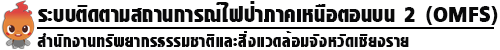
<style>
.page{position:relative;width:500px;height:50px;background:#ffffff}
.page>*{position:absolute;margin:0}
.t1{font:33.3px "PSLImperialExtra";letter-spacing:0.005em;color:#09090a}
.t2{font:25px "PSLImperialExtra";letter-spacing:0.02em;color:#09090a}
</style>
<div class="page">
<p class="t1" style="left:38px;top:1px;width:460px;height:24px">ระบบติดตามสถานการณ์ไฟป่าภาคเหนือตอนบน 2 (OMFS)</p>
<p class="t2" style="left:37px;top:31px;width:372px;height:16px">สำนักงานทรัพยากรธรรมชาติและสิ่งแวดล้อมจังหวัดเชียงราย</p>
</div>
